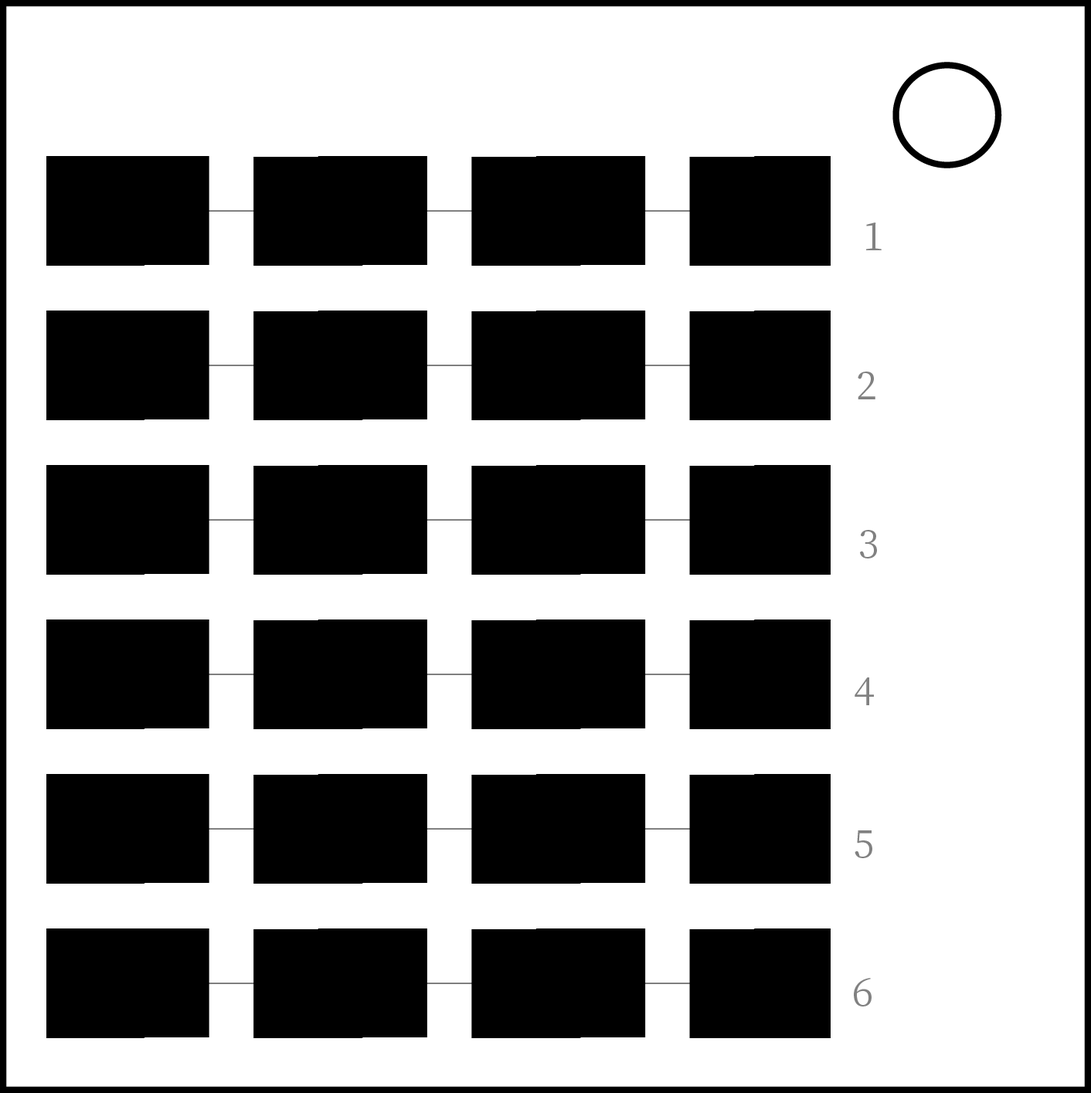
<style>
.page{position:relative;width:1091px;height:1093px;background:#ffffff}
.page>*{position:absolute;margin:0}
.t1{font:9.3px "NotoSerifJP-Regular";color:#818181}
</style>
<div class="page">
<p class="t1" style="left:866px;top:222px;width:15px;height:28px">1</p>
<p class="t1" style="left:858px;top:372px;width:17px;height:27px">2</p>
<p class="t1" style="left:860px;top:530px;width:17px;height:29px">3</p>
<p class="t1" style="left:854px;top:678px;width:20px;height:27px">4</p>
<p class="t1" style="left:854px;top:830px;width:18px;height:28px">5</p>
<p class="t1" style="left:854px;top:978px;width:17px;height:29px">6</p>
</div>
